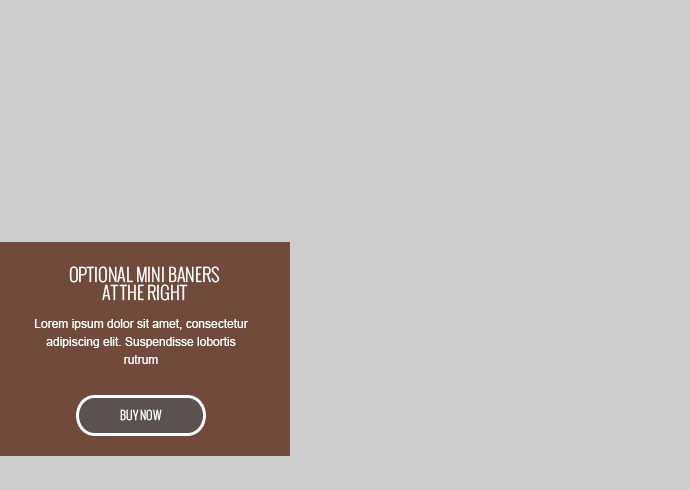
<style>
.page{position:relative;width:690px;height:490px;background:#cdcdcd}
.page>*{position:absolute;margin:0}
.t1{font:18px/18px "Oswald-Light";color:#ffffff;text-transform:uppercase}
.t2{font:12px/18px "ArialMT";color:#ffffff}
.t3{font:12px "Oswald-Light";color:#ffffff;text-transform:uppercase}
</style>
<div class="page">
<p class="t1" style="left:69px;top:266px;width:151px;height:35px;text-align:center">OPTIONAL MINI BANERS <br>AT THE RIGHT</p>
<p class="t2" style="left:35px;top:319px;width:213px;height:45px;text-align:center">Lorem ipsum dolor sit amet, consectetur adipiscing elit. Suspendisse lobortis rutrum</p>
<p class="t3" style="left:120px;top:409px;width:42px;height:12px">BUY NOW</p>
</div>
